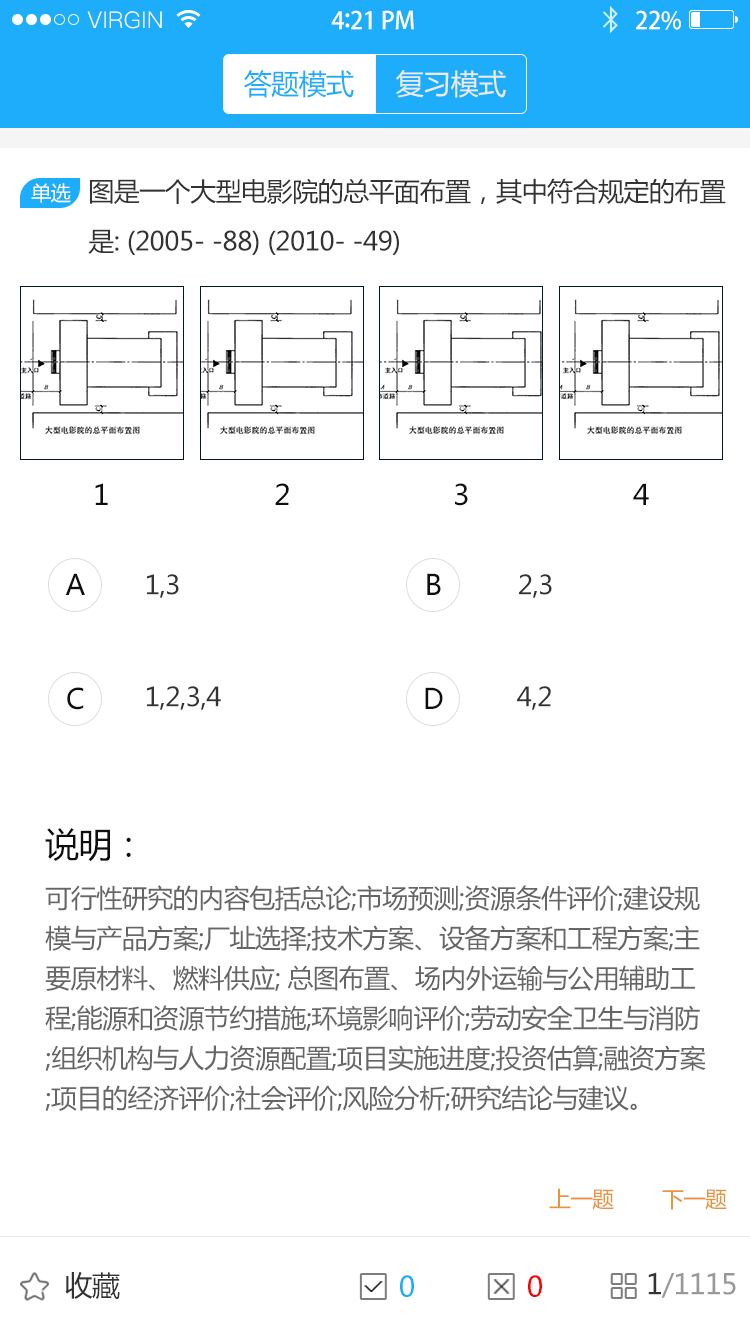
<style>
.page{position:relative;width:750px;height:1334px;background:#ffffff}
.page>*{position:absolute;margin:0}
.t1{font:23px "PingFang-SC-Regular";letter-spacing:0.02em;color:#ffffff}
.t2{font:24px "AdobeHeitiStd-Regular";letter-spacing:-0.02em;color:#ffffff}
.t3{font:26px "AdobeHeitiStd-Regular";letter-spacing:-0.02em;color:#ffffff}
.t4{font:28px "MicrosoftYaHei";letter-spacing:-0.02em;color:#1dadfa}
.t5{font:28px "MicrosoftYaHei";letter-spacing:-0.02em;color:#ebebeb}
.t6{font:20px "MicrosoftYaHei";letter-spacing:-0.02em;color:#fefefe}
.t7{font:26px/50px "MicrosoftYaHei";letter-spacing:-0.02em;color:#333333}
.t8{font:28px "MicrosoftYaHei";letter-spacing:-0.02em;color:#0e0e0e}
.t9{font:26px "MicrosoftYaHei";letter-spacing:-0.02em;color:#333333}
.t10{font:34px "MicrosoftYaHei";letter-spacing:-0.02em;color:#0e0e0e}
.t11{font:26px/40px "MicrosoftYaHei";letter-spacing:-0.02em;color:#666666}
.t12{font:22px "MicrosoftYaHei";letter-spacing:-0.02em;color:#e6943e}
.t13{font:28px "MicrosoftYaHei";letter-spacing:-0.02em;color:#333333}
.t14{font:28px "MicrosoftYaHei";letter-spacing:-0.02em;color:#1dacf9}
.t15{font:28px "MicrosoftYaHei";letter-spacing:-0.02em;color:#ff0000}
.t16{font:28px "MicrosoftYaHei";letter-spacing:-0.02em;color:#999999}
</style>
<div class="page">
<p class="t1" style="left:87px;top:11px;width:75px;height:18px">VIRGIN</p>
<p class="t2" style="left:331px;top:10px;width:83px;height:20px">4<span class="t3">:</span>21 PM</p>
<p class="t2" style="left:636px;top:10px;width:45px;height:20px">22%</p>
<p class="t4" style="left:244px;top:70px;width:110px;height:28px">答题模式</p>
<p class="t5" style="left:396px;top:70px;width:110px;height:28px">复习模式</p>
<p class="t6" style="left:31px;top:183px;width:40px;height:20px">单选</p>
<p class="t7" style="left:88px;top:178px;width:638px;height:77px">图是一个大型电影院的总平面布置，其中符合规定的布置<br>是: (2005- -88) (2010- -49)</p>
<p class="t8" style="left:95px;top:483px;width:13px;height:22px">1</p>
<p class="t8" style="left:275px;top:483px;width:14px;height:22px">2</p>
<p class="t8" style="left:455px;top:483px;width:13px;height:23px">3</p>
<p class="t8" style="left:633px;top:483px;width:16px;height:22px">4</p>
<p class="t8" style="left:65px;top:573px;width:20px;height:22px">A</p>
<p class="t9" style="left:147px;top:574px;width:32px;height:24px">1,3</p>
<p class="t8" style="left:427px;top:573px;width:14px;height:22px">B</p>
<p class="t9" style="left:519px;top:574px;width:33px;height:24px">2,3</p>
<p class="t8" style="left:67px;top:687px;width:17px;height:23px">C</p>
<p class="t9" style="left:147px;top:686px;width:74px;height:24px">1,2,3,4</p>
<p class="t8" style="left:425px;top:687px;width:18px;height:22px">D</p>
<p class="t9" style="left:517px;top:686px;width:34px;height:24px">4,2</p>
<p class="t10" style="left:45px;top:828px;width:86px;height:34px">说明：</p>
<p class="t11" style="left:45px;top:885px;width:661px;height:226px">可行性研究的内容包括总论;市场预测;资源条件评价;建设规<br>模与产品方案;厂址选择;技术方案、设备方案和工程方案;主<br>要原材料、燃料供应; 总图布置、场内外运输与公用辅助工<br>程;能源和资源节约措施;环境影响评价;劳动安全卫生与消防<br>;组织机构与人力资源配置;项目实施进度;投资估算;融资方案<br>;项目的经济评价;社会评价;风险分析;研究结论与建议。</p>
<p class="t12" style="left:549px;top:1188px;width:65px;height:22px">上一题</p>
<p class="t12" style="left:662px;top:1189px;width:65px;height:21px">下一题</p>
<p class="t13" style="left:65px;top:1272px;width:55px;height:27px">收藏</p>
<p class="t14" style="left:400px;top:1275px;width:14px;height:22px">0</p>
<p class="t15" style="left:528px;top:1275px;width:14px;height:22px">0</p>
<p class="t16" style="left:648px;top:1272px;width:88px;height:26px"><span class="t13">1</span>/1115</p>
</div>
